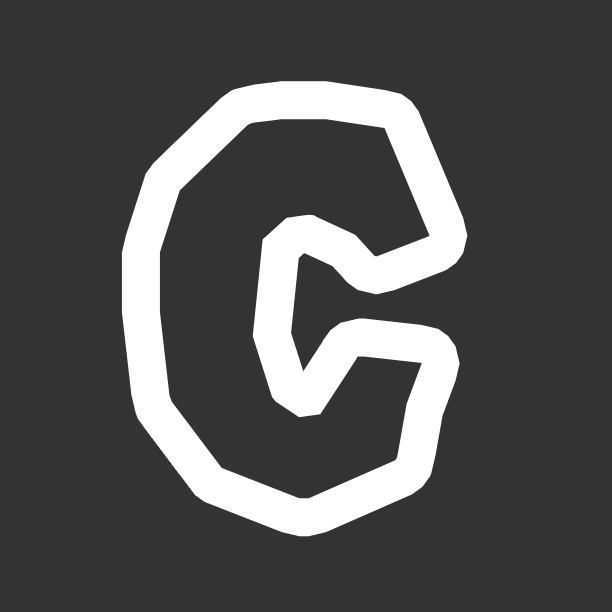
<style>
.page{position:relative;width:612px;height:612px;background:#333333}
.page>*{position:absolute;margin:0}
.t1{font:583px "DKSnippitySnap";letter-spacing:0.04em;color:#333333}
</style>
<div class="page">
<p class="t1" style="left:159px;top:119px;width:271px;height:380px">C</p>
</div>
